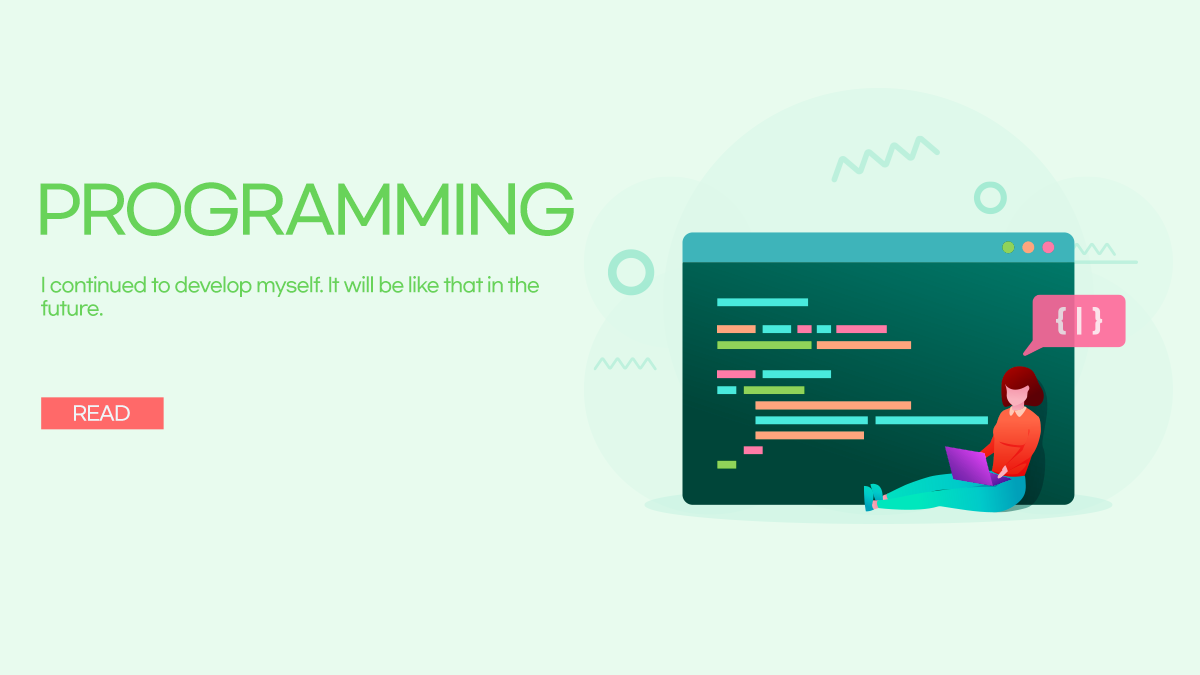
<style>
.page{position:relative;width:1200px;height:675px;background:#e8fbee}
.page>*{position:absolute;margin:0}
.t1{font:64px "GmarketSansTTFMedium";letter-spacing:-0.05em;color:#68d359;text-transform:uppercase}
.t2{font:19.5px "GmarketSansTTFMedium";letter-spacing:-0.05em;color:#68d359}
.t3{font:19.5px "GmarketSansTTFMedium";letter-spacing:-0.05em;color:#eef6f9;text-transform:uppercase}
</style>
<div class="page">
<p class="t1" style="left:40px;top:182px;width:534px;height:54px">programming</p>
<p class="t2" style="left:41px;top:276px;width:498px;height:40px">I continued to develop myself. It will be like that in the future.</p>
<p class="t3" style="left:74px;top:405px;width:56px;height:16px">read</p>
</div>
